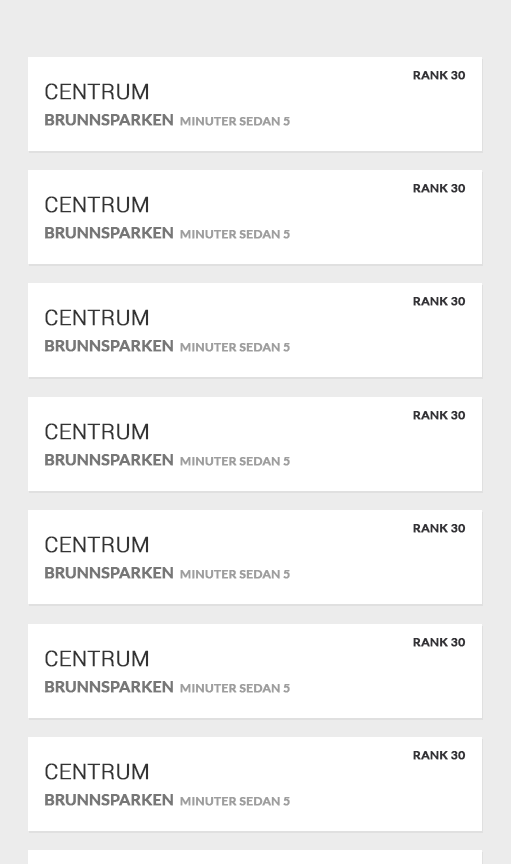
<style>
.page{position:relative;width:511px;height:864px;background:#ffffff}
.page>*{position:absolute;margin:0}
.t1{font:12px "Lato-Bold";color:#333236;text-transform:uppercase;font-weight:bold}
.t2{font:21.6px "Roboto-Light";color:#333333;text-transform:uppercase;font-weight:bold}
.t3{font:15.6px "Lato-Bold";color:#777777;text-transform:uppercase;font-weight:bold}
.t4{font:12px "Lato-Bold";color:#9e9e9e;text-transform:uppercase;font-weight:bold}
</style>
<div class="page">
<p class="t1" style="left:413px;top:71px;width:53px;height:9px">rank 30</p>
<p class="t2" style="left:45px;top:83px;width:104px;height:17px">Centrum</p>
<p class="t3" style="left:45px;top:114px;width:128px;height:12px">Brunnsparken</p>
<p class="t4" style="left:180px;top:117px;width:110px;height:9px">5 minuter sedan</p>
<p class="t1" style="left:413px;top:184px;width:53px;height:9px">rank 30</p>
<p class="t2" style="left:45px;top:196px;width:104px;height:17px">Centrum</p>
<p class="t3" style="left:45px;top:227px;width:128px;height:12px">Brunnsparken</p>
<p class="t4" style="left:180px;top:230px;width:110px;height:9px">5 minuter sedan</p>
<p class="t1" style="left:413px;top:297px;width:53px;height:9px">rank 30</p>
<p class="t2" style="left:45px;top:309px;width:104px;height:17px">Centrum</p>
<p class="t3" style="left:45px;top:340px;width:128px;height:12px">Brunnsparken</p>
<p class="t4" style="left:180px;top:343px;width:110px;height:9px">5 minuter sedan</p>
<p class="t1" style="left:413px;top:411px;width:53px;height:9px">rank 30</p>
<p class="t2" style="left:45px;top:423px;width:104px;height:17px">Centrum</p>
<p class="t3" style="left:45px;top:454px;width:128px;height:12px">Brunnsparken</p>
<p class="t4" style="left:180px;top:457px;width:110px;height:9px">5 minuter sedan</p>
<p class="t1" style="left:413px;top:524px;width:53px;height:9px">rank 30</p>
<p class="t2" style="left:45px;top:536px;width:104px;height:17px">Centrum</p>
<p class="t3" style="left:45px;top:567px;width:128px;height:12px">Brunnsparken</p>
<p class="t4" style="left:180px;top:570px;width:110px;height:9px">5 minuter sedan</p>
<p class="t1" style="left:413px;top:638px;width:53px;height:9px">rank 30</p>
<p class="t2" style="left:45px;top:650px;width:104px;height:17px">Centrum</p>
<p class="t3" style="left:45px;top:681px;width:128px;height:12px">Brunnsparken</p>
<p class="t4" style="left:180px;top:684px;width:110px;height:9px">5 minuter sedan</p>
<p class="t1" style="left:413px;top:751px;width:53px;height:9px">rank 30</p>
<p class="t2" style="left:45px;top:763px;width:104px;height:17px">Centrum</p>
<p class="t3" style="left:45px;top:794px;width:128px;height:12px">Brunnsparken</p>
<p class="t4" style="left:180px;top:797px;width:110px;height:9px">5 minuter sedan</p>
</div>
